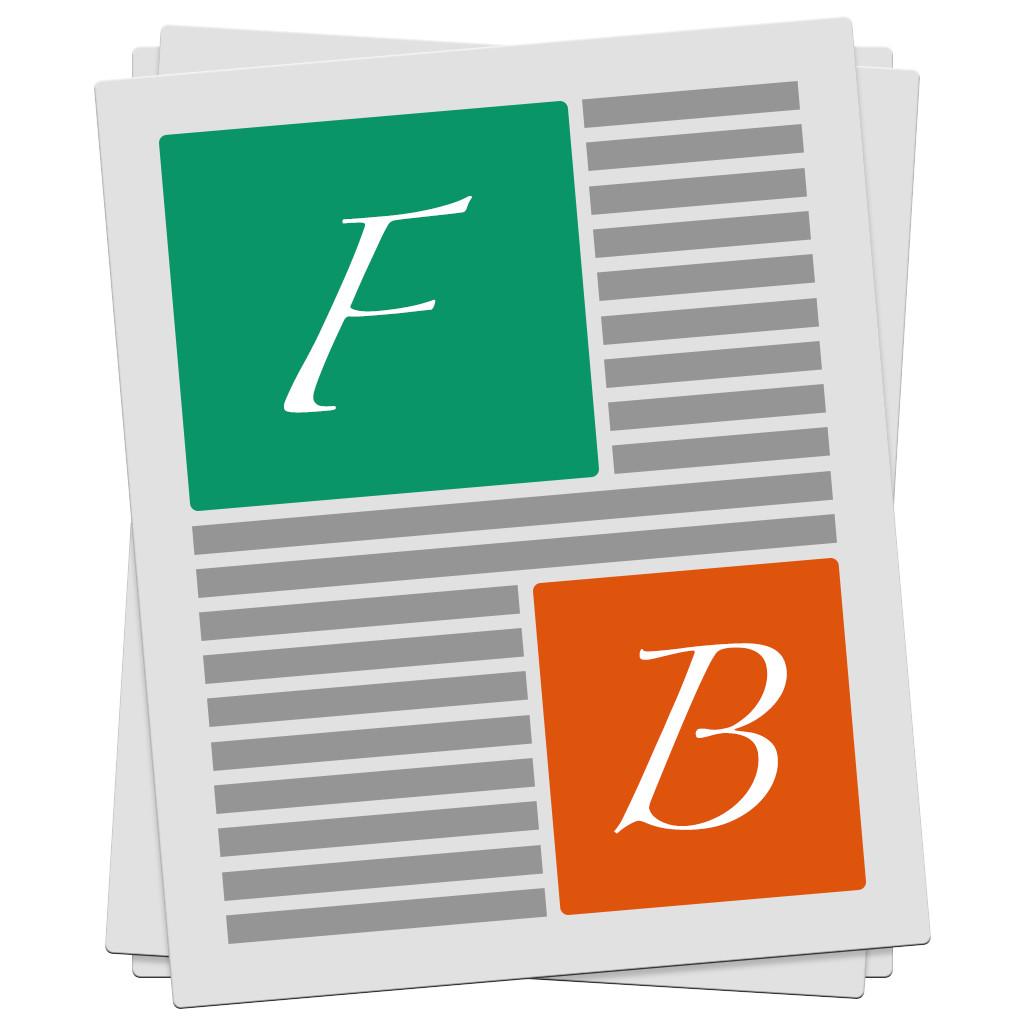
<style>
.page{position:relative;width:1024px;height:1024px;background:#e1e1e1}
.page>*{position:absolute;margin:0}
.t1{font:170px "Zapfino";color:#ffffff}
.t2{font:170px "Zapfino"}
.t3{font:160px "Zapfino";color:#ffffff}
</style>
<div class="page">
<p class="t1" style="left:284px;top:196px;width:188px;height:217px;rotate:-5deg">F</p>
<p class="t2" style="left:293px;top:193px;width:207px;height:203px">F</p>
<p class="t3" style="left:614px;top:643px;width:173px;height:191px;rotate:-5deg">B</p>
</div>
